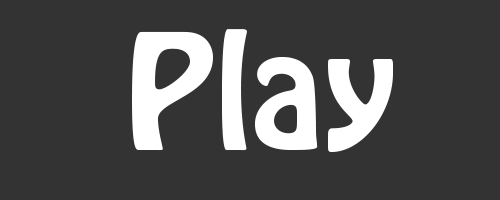
<style>
.page{position:relative;width:500px;height:200px;background:#333333}
.page>*{position:absolute;margin:0}
.t1{font:141.7px "HoboStd";color:#ffffff}
</style>
<div class="page">
<p class="t1" style="left:132px;top:29px;width:261px;height:124px">Play</p>
</div>
